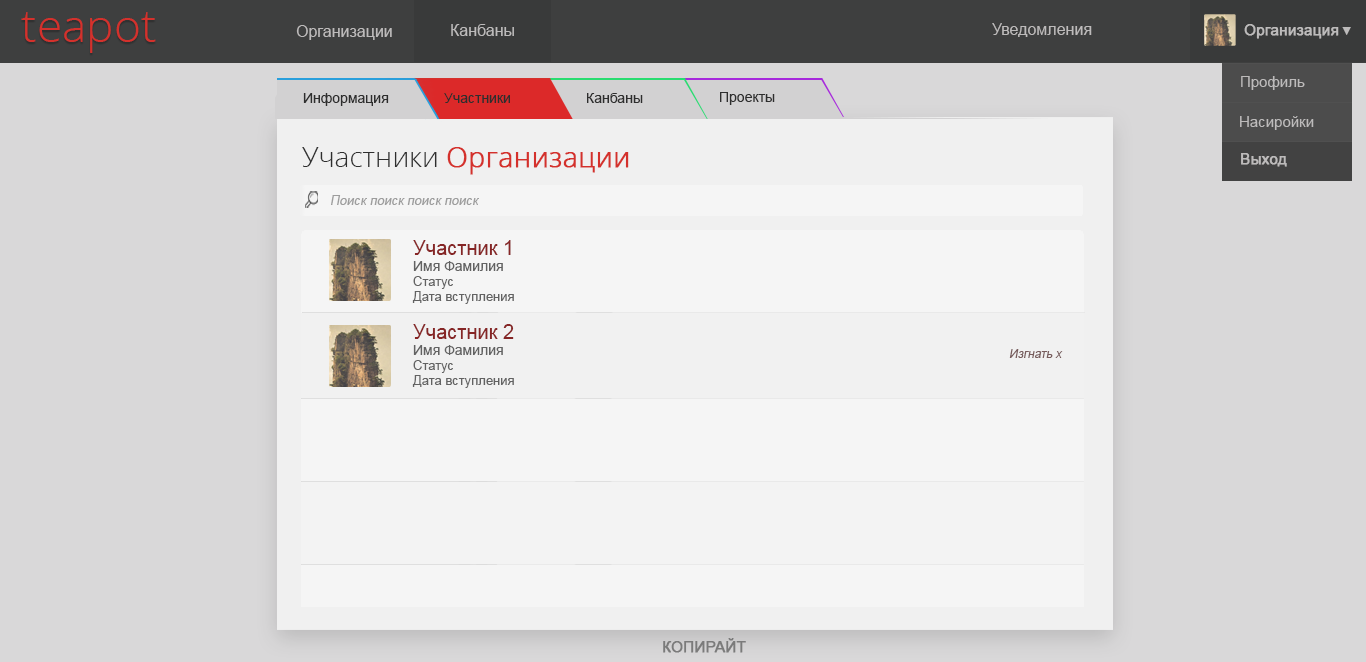
<style>
.page{position:relative;width:1366px;height:662px;background:#d9d8d9}
.page>*{position:absolute;margin:0}
.t1{font:46px "OpenSans-Light";color:#d4312c}
.t2{font:16px "ArialMT";color:#bdbbbb}
.t3{font:15px "ArialMT";color:#bdbbbb;font-weight:bold}
.t4{font:12.3px "ArialMT";color:#bdbbbb}
.t5{font:15px "ArialMT";color:#bdbbbb}
.t6{font:14px "ArialMT";color:#2e2e2e}
.t7{font:28px "OpenSans-Light";color:#d4312c;font-weight:bold}
.t8{font:28px "OpenSans-Light";color:#2e2e2e}
.t9{font:13px "ArialMT";color:#9c9c9c;font-style:italic}
.t10{font:20px "ArialMT";color:#862626}
.t11{font:14px "ArialMT";color:#626262}
.t12{font:13px "ArialMT";color:#626262}
.t13{font:12px "ArialMT";color:#775c5c;font-style:italic}
.t14{font:15px "ArialMT";color:#7b7a7a;font-weight:bold}
</style>
<div class="page">
<p class="t1" style="left:21px;top:12px;width:135px;height:41px">teapot</p>
<p class="t2" style="left:296px;top:25px;width:96px;height:15px">Организации</p>
<p class="t2" style="left:451px;top:24px;width:63px;height:12px">Канбаны</p>
<p class="t2" style="left:992px;top:23px;width:100px;height:14px">Уведомления</p>
<p class="t3" style="left:1244px;top:24px;width:95px;height:15px">Организация</p>
<p class="t4" style="left:1342px;top:27px;width:9px;height:8px">▼</p>
<p class="t5" style="left:1241px;top:76px;width:64px;height:14px">Профиль</p>
<p class="t6" style="left:303px;top:93px;width:86px;height:13px">Информация</p>
<p class="t6" style="left:444px;top:93px;width:66px;height:10px">Участники</p>
<p class="t6" style="left:587px;top:93px;width:56px;height:10px">Канбаны</p>
<p class="t6" style="left:720px;top:92px;width:55px;height:13px">Проекты</p>
<p class="t5" style="left:1240px;top:116px;width:74px;height:14px">Насиройки</p>
<p class="t7" style="left:302px;top:147px;width:327px;height:28px"><span class="t8">Участники </span>Организации</p>
<p class="t3" style="left:1241px;top:153px;width:46px;height:14px">Выход</p>
<p class="t9" style="left:331px;top:195px;width:148px;height:10px">Поиск поиск поиск поиск</p>
<p class="t10" style="left:413px;top:240px;width:98px;height:15px">Участник 1</p>
<p class="t11" style="left:413px;top:261px;width:90px;height:10px">Имя Фамилия</p>
<p class="t12" style="left:413px;top:276px;width:40px;height:13px">Статус</p>
<p class="t12" style="left:412px;top:291px;width:102px;height:13px">Дата вступления</p>
<p class="t10" style="left:413px;top:324px;width:101px;height:15px">Участник 2</p>
<p class="t11" style="left:413px;top:345px;width:90px;height:10px">Имя Фамилия</p>
<p class="t13" style="left:1009px;top:349px;width:54px;height:9px">Изгнать х</p>
<p class="t12" style="left:413px;top:360px;width:40px;height:13px">Статус</p>
<p class="t12" style="left:412px;top:375px;width:102px;height:13px">Дата вступления</p>
<p class="t14" style="left:663px;top:638px;width:83px;height:15px">КОПИРАЙТ</p>
</div>
